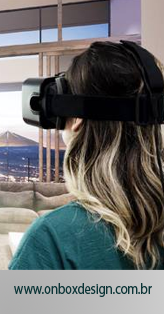
<style>
.page{position:relative;width:164px;height:314px}
.page>*{position:absolute;margin:0}
.t1{font:14.7px "MyriadPro-Regular";color:#0c3436;scale:0.85 1}
</style>
<div class="page">
<p class="t1" style="left:14px;top:283px;width:138px;height:14px">www.onboxdesign.com.br</p>
</div>
